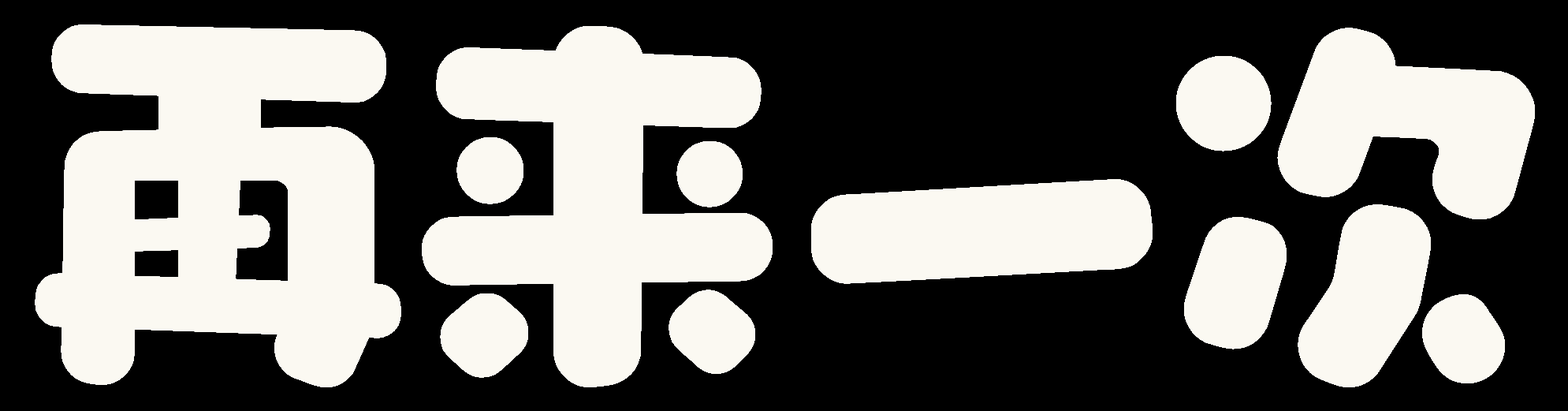
<style>
.page{position:relative;width:1568px;height:411px;background:#000000}
.page>*{position:absolute;margin:0}
.t1{font:431.5px "024-SSRuanTangTi";color:#fbf9f2}
</style>
<div class="page">
<p class="t1" style="left:0px;top:0px;width:1568px;height:411px">再来一次</p>
</div>
